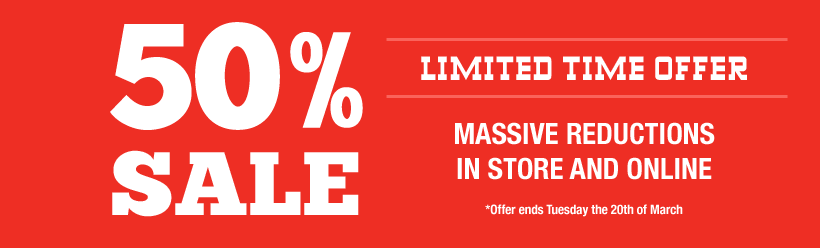
<style>
.page{position:relative;width:820px;height:248px;background:#ee2e24}
.page>*{position:absolute;margin:0}
.t1{font:148.6px "ChunkFive-Roman";color:#ffffff}
.t2{font:29.3px "Highlands-Regular";color:#ffffff}
.t3{font:29.3px "HelveticaNeue-CondensedBold";color:#ffffff}
.t4{font:89.7px "ChunkFive-Roman";color:#ffffff}
.t5{font:13px "HelveticaNeue-CondensedBold";color:#ffffff}
</style>
<div class="page">
<p class="t1" style="left:110px;top:22px;width:253px;height:108px">50%</p>
<p class="t2" style="left:421px;top:56px;width:326px;height:24px">LIMITED TIME OFFER</p>
<p class="t3" style="left:455px;top:122px;width:260px;height:58px;text-align:center">MASSIVE REDUCTIONS<br>IN STORE AND ONLINE</p>
<p class="t4" style="left:112px;top:150px;width:247px;height:67px">SALE</p>
<p class="t5" style="left:485px;top:204px;width:198px;height:13px">*Offer ends Tuesday the 20th of March</p>
</div>
